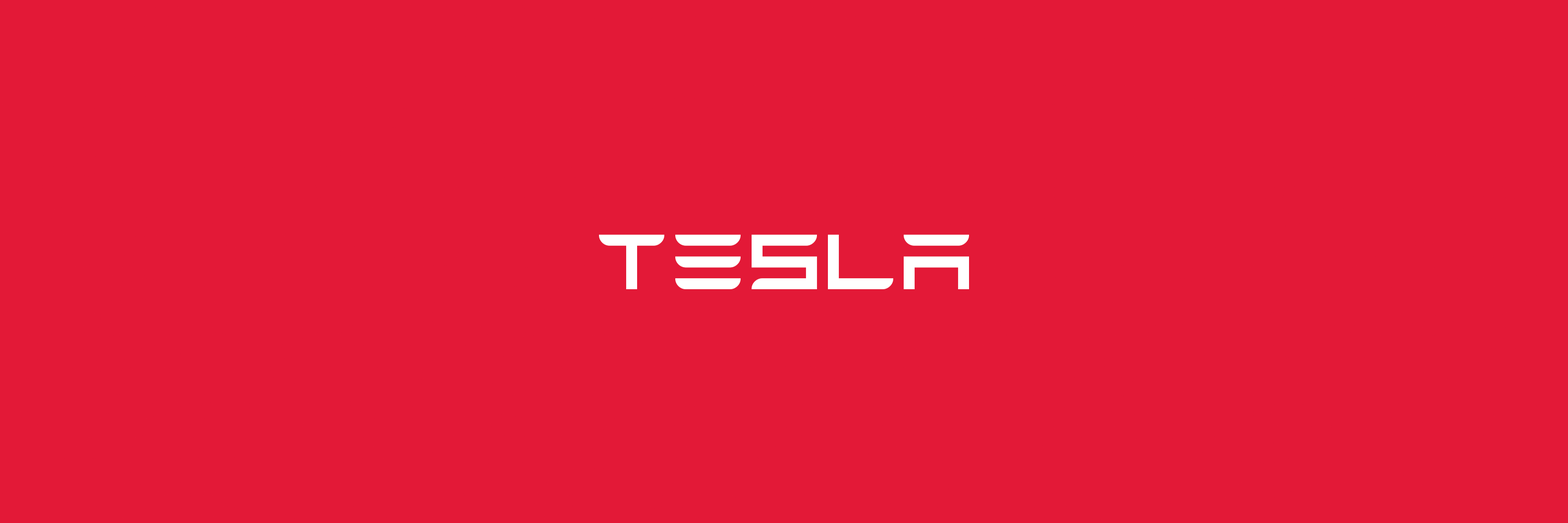
<style>
.page{position:relative;width:1568px;height:523px;background:#e31937}
.page>*{position:absolute;margin:0}
.t1{font:87.1px "TESLA";color:#ffffff}
</style>
<div class="page">
<p class="t1" style="left:599px;top:234px;width:370px;height:55px">TESLA</p>
</div>
